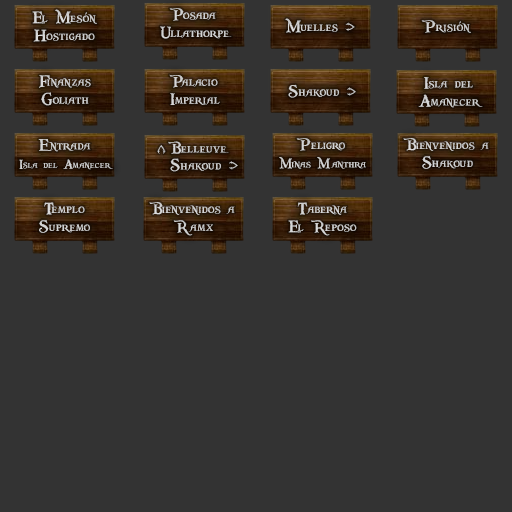
<style>
.page{position:relative;width:512px;height:512px;background:#333333}
.page>*{position:absolute;margin:0}
.t1{font:18px/18px "PiecesofEight";color:#d4d4d4}
.t2{font:18px/18px "PiecesofEight";color:#d2d2d2}
.t3{font:18px "PiecesofEight";color:#d2d2d2}
.t4{font:18px/18px "PiecesofEight";color:#d0d0d0}
.t5{font:18px "PiecesofEight";color:#d1d1d1}
.t6{font:14px/18px "PiecesofEight";color:#d1d1d1}
.t7{font:18px/18px "PiecesofEight";color:#d1d1d1}
.t8{font:18px "PiecesofEight";color:#bfbfbf}
.t9{font:18px "PiecesofEight";color:#d0d0d0}
.t10{font:15px/18px "PiecesofEight";color:#d1d1d1}
.t11{font:18px/18px "PiecesofEight";color:#d3d3d3}
</style>
<div class="page">
<p class="t1" style="left:32px;top:9px;width:65px;height:33px;text-align:center">El Mesón<br>Hostigado</p>
<p class="t2" style="left:160px;top:8px;width:72px;height:31px;text-align:center">Posada<br>Ullathorpe</p>
<p class="t3" style="left:285px;top:18px;width:70px;height:15px">Muelles &gt;</p>
<p class="t3" style="left:421px;top:20px;width:50px;height:13px">Prisión</p>
<p class="t2" style="left:39px;top:75px;width:52px;height:31px;text-align:center">Finanzas<br>Goliath</p>
<p class="t2" style="left:169px;top:74px;width:51px;height:31px;text-align:center">Palacio<br>Imperial</p>
<p class="t4" style="left:418px;top:77px;width:65px;height:31px;text-align:center">Isla del<br>Amanecer</p>
<p class="t5" style="left:288px;top:84px;width:68px;height:14px">Shakoud &gt;</p>
<p class="t6" style="left:19px;top:139px;width:94px;height:31px;text-align:center"><span class="t7">Entrada<br></span>Isla del Amanecer</p>
<p class="t8" style="left:157px;top:145px;width:9px;height:9px;rotate:91deg">&lt;</p>
<p class="t9" style="left:168px;top:141px;width:61px;height:13px">Belleuve</p>
<p class="t10" style="left:279px;top:138px;width:87px;height:31px;text-align:center"><span class="t7">Peligro<br></span>Minas Manthra</p>
<p class="t11" style="left:403px;top:138px;width:86px;height:31px;text-align:center">Bienvenidos a<br>Shakoud</p>
<p class="t3" style="left:170px;top:158px;width:68px;height:14px">Shakoud &gt;</p>
<p class="t11" style="left:39px;top:202px;width:51px;height:31px;text-align:center">Templo<br>Supremo</p>
<p class="t11" style="left:149px;top:202px;width:86px;height:34px;text-align:center">Bienvenidos a<br>Ramx</p>
<p class="t11" style="left:288px;top:202px;width:69px;height:34px;text-align:center">Taberna<br>El Reposo</p>
</div>
